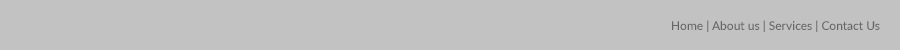
<style>
.page{position:relative;width:900px;height:50px;background:#c2c2c2}
.page>*{position:absolute;margin:0}
.t1{font:12px "Lato-Medium";color:#666666}
</style>
<div class="page">
<p class="t1" style="left:672px;top:20px;width:208px;height:12px">Home | About us | Services | Contact Us</p>
</div>
